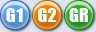
<style>
.page{position:relative;width:96px;height:32px}
.page>*{position:absolute;margin:0}
.t1{font:18px "Impact";letter-spacing:0.04em;color:#ffffff}
.t2{font:18px "Impact";color:#ffffff}
</style>
<div class="page">
<p class="t1" style="left:6px;top:8px;width:17px;height:14px">G1</p>
<p class="t2" style="left:38px;top:8px;width:18px;height:14px">G2</p>
<p class="t2" style="left:69px;top:8px;width:19px;height:14px">GR</p>
</div>
